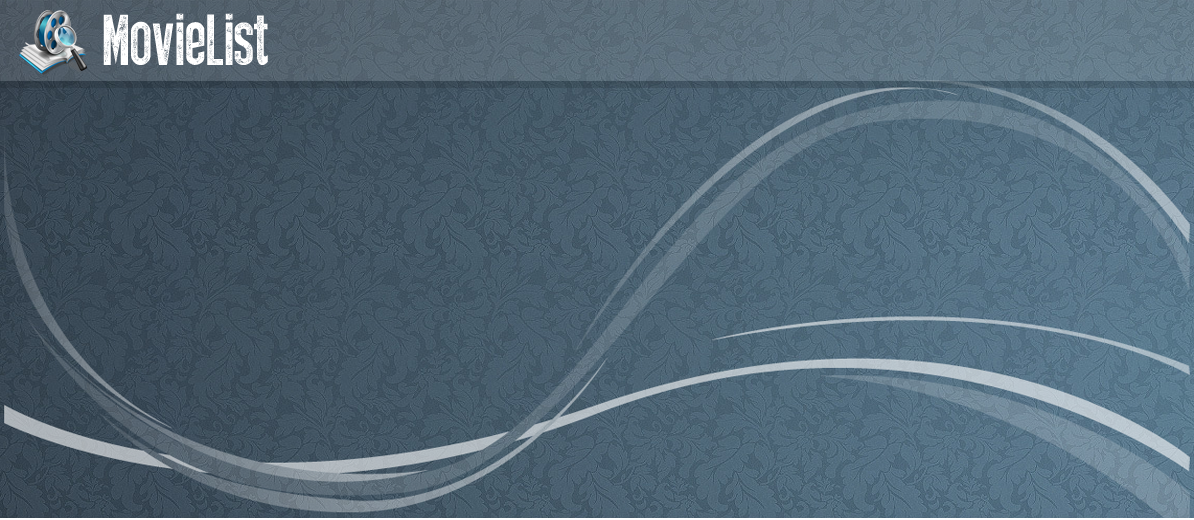
<style>
.page{position:relative;width:1194px;height:520px}
.page>*{position:absolute;margin:0}
.t1{font:72px "PressStyle";color:#ffffff}
</style>
<div class="page">
<p class="t1" style="left:103px;top:13px;width:165px;height:52px">MovieList</p>
</div>
